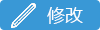
<style>
.page{position:relative;width:100px;height:30px;background:#3998d6}
.page>*{position:absolute;margin:0}
.t1{font:18px "MicrosoftYaHei";color:#ffffff}
</style>
<div class="page">
<p class="t1" style="left:47px;top:7px;width:36px;height:17px">修改</p>
</div>
